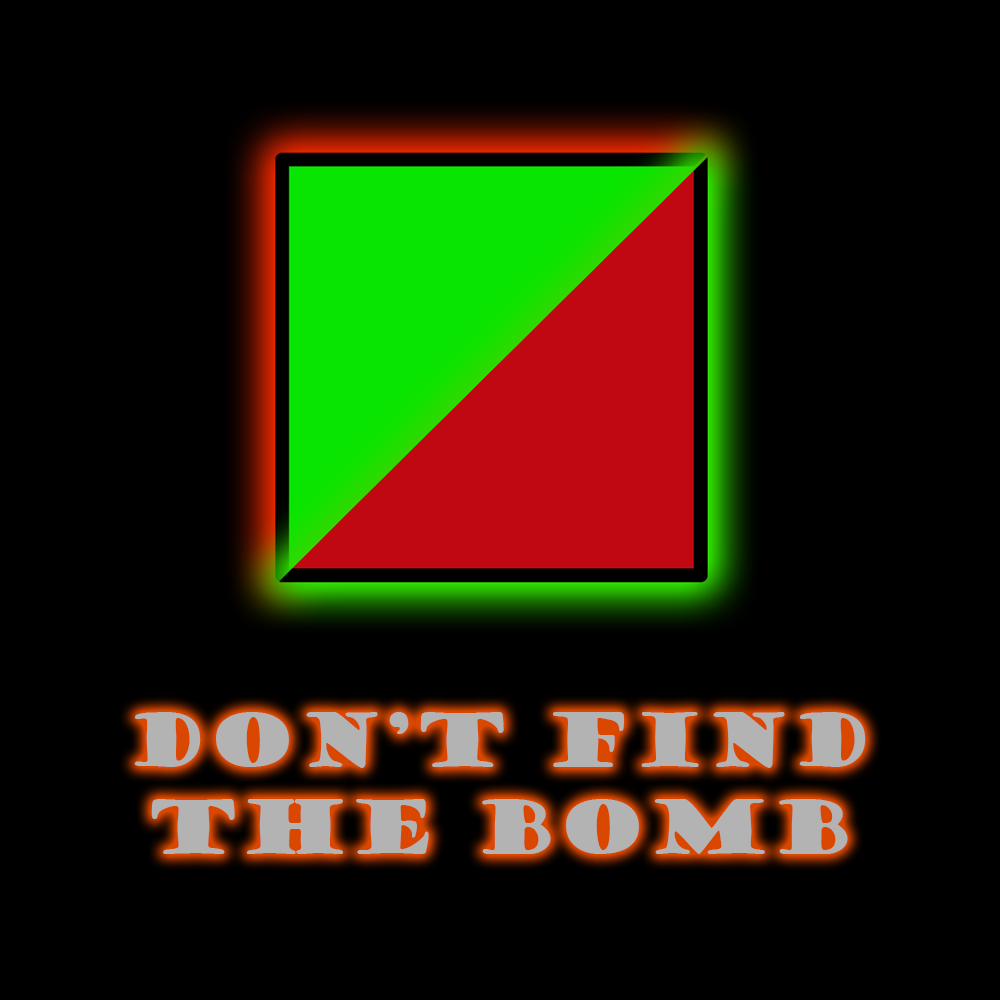
<style>
.page{position:relative;width:1000px;height:1000px;background:#000000}
.page>*{position:absolute;margin:0}
.t1{font:72.6px "GoudyStout";color:#b3b3b3}
</style>
<div class="page">
<p class="t1" style="left:134px;top:712px;width:732px;height:142px;text-align:center">DON’T FIND<br>THE BOMB</p>
</div>
